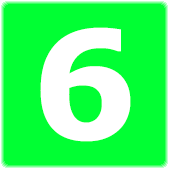
<style>
.page{position:relative;width:169px;height:169px;background:#00ff33}
.page>*{position:absolute;margin:0}
.t1{font:150px "Verdana-Bold";color:#ffffff;text-transform:uppercase}
</style>
<div class="page">
<p class="t1" style="left:40px;top:27px;width:91px;height:115px">6</p>
</div>
